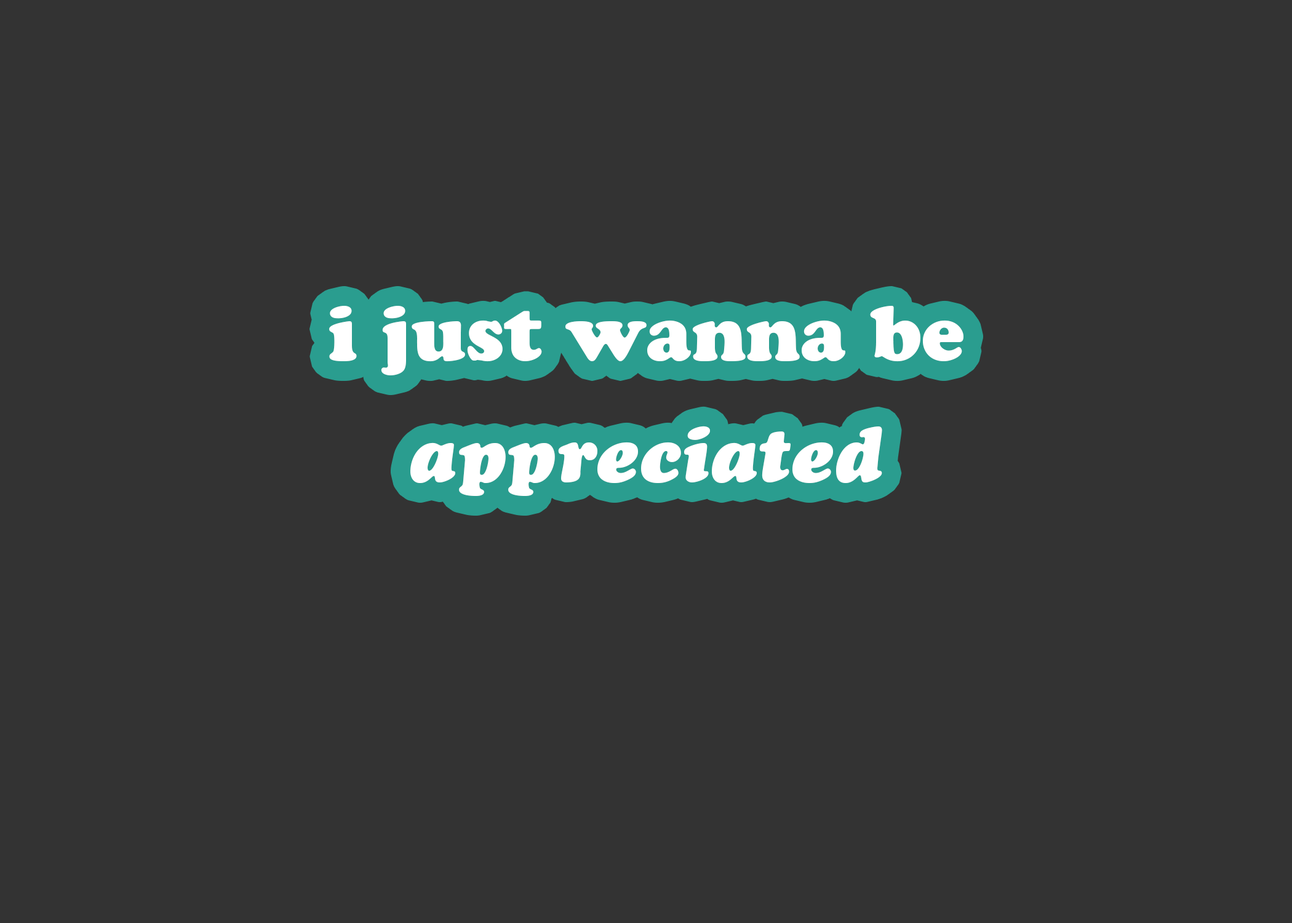
<style>
.page{position:relative;width:1292px;height:923px;background:#333333}
.page>*{position:absolute;margin:0}
.t1{font:76.9px "CooperBlackStd";color:#ffffff}
.t2{font:76.9px "CooperBlackStd-Italic";color:#ffffff}
</style>
<div class="page">
<p class="t1" style="left:329px;top:306px;width:635px;height:69px">i just wanna be</p>
<p class="t2" style="left:410px;top:426px;width:472px;height:70px">appreciated</p>
</div>
